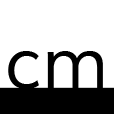
<style>
.page{position:relative;width:114px;height:114px;background:#ffffff}
.page>*{position:absolute;margin:0}
.t1{font:72px "Muli";color:#000000}
</style>
<div class="page">
<p class="t1" style="left:8px;top:51px;width:95px;height:38px">cm</p>
</div>
